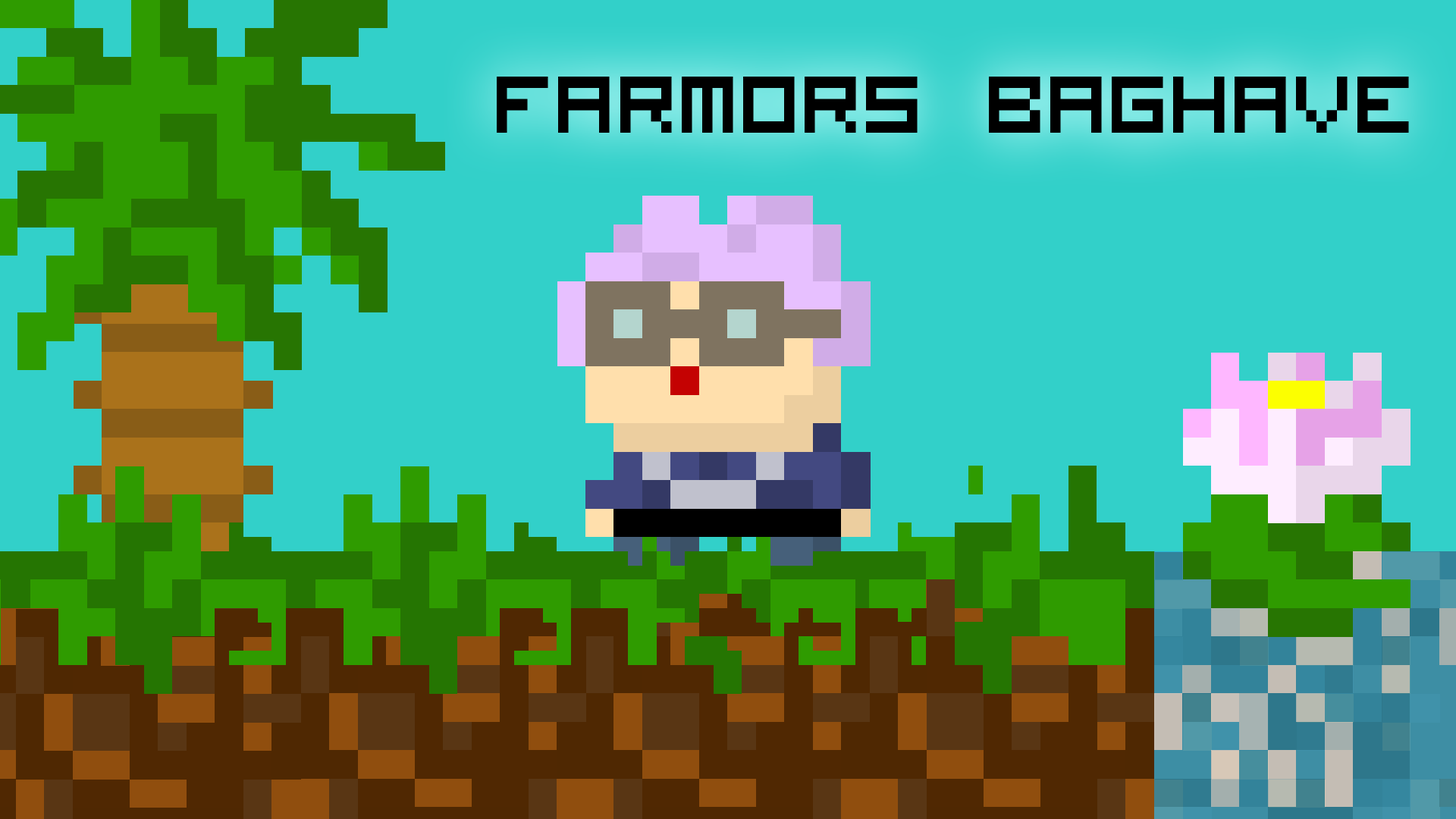
<style>
.page{position:relative;width:1456px;height:819px;background:#32d0c9}
.page>*{position:absolute;margin:0}
.t1{font:112.5px "VisitorTT1BRK";color:#000000;scale:0.91 1}
</style>
<div class="page">
<p class="t1" style="left:497px;top:77px;width:912px;height:56px">farmors baghave</p>
</div>
